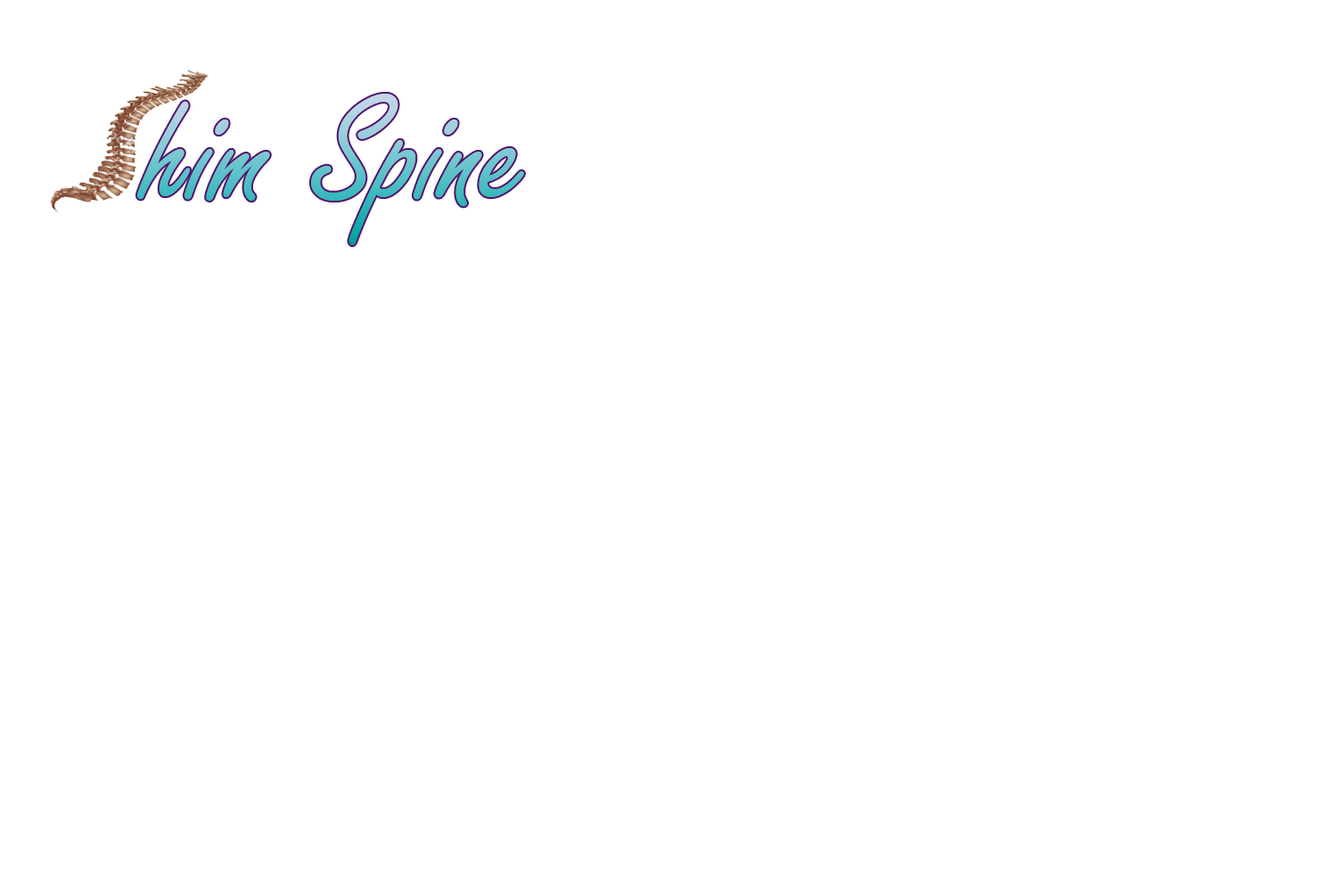
<style>
.page{position:relative;width:1337px;height:892px;background:#ffffff}
.page>*{position:absolute;margin:0}
.t1{font:164.1px "FreestyleScript-Regular"}
</style>
<div class="page">
<p class="t1" style="left:137px;top:94px;width:387px;height:151px">him Spine</p>
</div>
